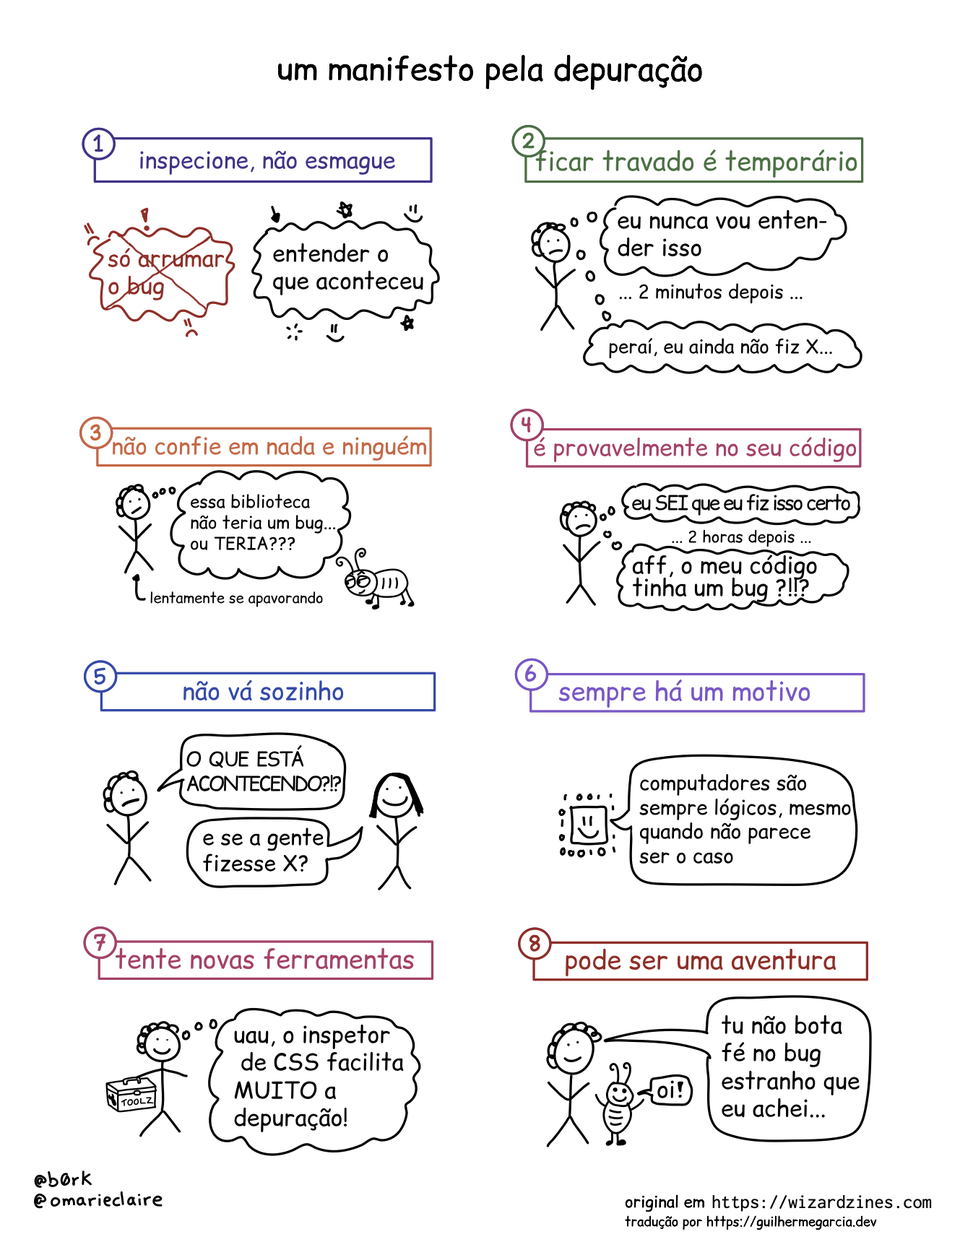
<style>
.page{position:relative;width:960px;height:1242px;background:#ffffff}
.page>*{position:absolute;margin:0}
.t1{font:31.8px "ComicRelief";color:#000000}
.t2{font:26px "ComicRelief";color:#4c7044}
.t3{font:23.1px "ComicRelief";color:#423387}
.t4{font:23.1px "ComicRelief";color:#000000}
.t5{font:23.1px "ComicRelief";color:#8f2e28}
.t6{font:23.1px "ComicRelief";color:#ffffff}
.t7{font:18.8px "ComicRelief";color:#000000}
.t8{font:23.1px "ComicRelief";color:#c46846}
.t9{font:23.1px "ComicRelief";color:#a44268}
.t10{font:17.3px "ComicRelief";color:#000000}
.t11{font:20.2px "ComicRelief";letter-spacing:-0.08em;color:#000000}
.t12{font:15.9px "ComicRelief";color:#000000}
.t13{font:14.4px "ComicRelief";color:#000000}
.t14{font:24.6px "ComicRelief";color:#354aa8}
.t15{font:26px "ComicRelief";color:#7957c6}
.t16{font:20.2px "ComicRelief";letter-spacing:-0.1em;color:#ffffff}
.t17{font:20.2px "ComicRelief";color:#ffffff}
.t18{font:20.2px "ComicRelief";letter-spacing:-0.08em;color:#ffffff}
.t19{font:20.2px "ComicRelief";letter-spacing:-0.1em;color:#000000}
.t20{font:20.2px "ComicRelief";color:#000000}
.t21{font:21.7px "ComicRelief";color:#000000}
.t22{font:26px "ComicRelief";color:#a44268}
.t23{font:26px "ComicRelief";color:#8f2e28}
.t24{font:13px "ComicRelief";color:#000000}
</style>
<div class="page">
<p class="t1" style="left:278px;top:55px;width:424px;height:35px">um manifesto pela depuração</p>
<p class="t2" style="left:535px;top:149px;width:322px;height:29px">ficar travado é temporário</p>
<p class="t3" style="left:140px;top:150px;width:256px;height:26px">inspecione, não esmague</p>
<p class="t4" style="left:618px;top:209px;width:209px;height:47px">eu nunca vou enten-<br>der isso</p>
<p class="t4" style="left:273px;top:243px;width:150px;height:52px">entender o <br>que aconteceu</p>
<p class="t5" style="left:108px;top:247px;width:117px;height:54px"><span class="t6">s</span>ó arrumar<br>o bug</p>
<p class="t7" style="left:619px;top:283px;width:183px;height:21px">... 2 minutos depois ...</p>
<p class="t7" style="left:609px;top:337px;width:223px;height:22px">peraí, eu ainda não fiz X...</p>
<p class="t8" style="left:113px;top:435px;width:314px;height:27px">não confie em nada e ninguém</p>
<p class="t9" style="left:534px;top:436px;width:323px;height:27px">é provavelmente no seu código</p>
<p class="t10" style="left:190px;top:494px;width:146px;height:56px">essa biblioteca<br>não teria um bug...<br>ou TERIA???</p>
<p class="t11" style="left:632px;top:493px;width:218px;height:23px">eu SEI que eu fiz isso certo</p>
<p class="t12" style="left:672px;top:529px;width:139px;height:18px">... 2 horas depois ...</p>
<p class="t4" style="left:632px;top:554px;width:185px;height:27px">aff, o meu código</p>
<p class="t4" style="left:632px;top:577px;width:178px;height:26px">tinha um bug ?!!?</p>
<p class="t13" style="left:150px;top:592px;width:173px;height:15px">lentamente se apavorando</p>
<p class="t14" style="left:183px;top:680px;width:161px;height:21px">não vá sozinho</p>
<p class="t15" style="left:558px;top:679px;width:252px;height:30px">sempre há um motivo</p>
<p class="t16" style="left:186px;top:745px;width:156px;height:47px"><span class="t17">O </span><span class="t18">QUE </span>ESTÁ<br>ACONTECENDO<span class="t19">?!?</span></p>
<p class="t20" style="left:639px;top:774px;width:212px;height:91px">computadores são<br>sempre lógicos, mesmo<br>quando não parece<br>ser o caso</p>
<p class="t21" style="left:203px;top:828px;width:121px;height:44px">e se a gente <br>fizesse X?</p>
<p class="t22" style="left:115px;top:948px;width:300px;height:22px">tente novas ferramentas</p>
<p class="t23" style="left:566px;top:948px;width:271px;height:29px">pode ser uma aventura</p>
<p class="t4" style="left:234px;top:1024px;width:170px;height:108px">uau, o inspetor<br> de CSS facilita<br>MUITO a<br>depuração!</p>
<p class="t4" style="left:721px;top:1015px;width:139px;height:103px">tu não bota<br>fé no bug <br>estranho que<br>eu achei...</p>
<p class="t4" style="left:657px;top:1080px;width:17px;height:19px">oi</p>
<p class="t12" style="left:625px;top:1195px;width:79px;height:18px">original em</p>
<p class="t24" style="left:625px;top:1216px;width:252px;height:15px">tradução por https://guilhermegarcia.dev</p>
</div>
